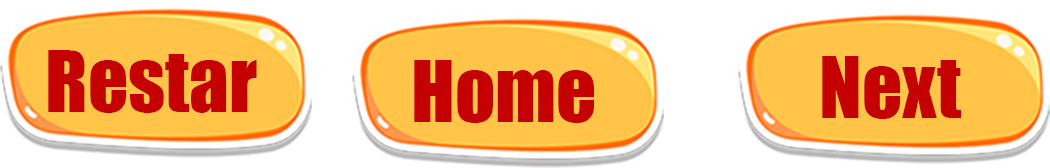
<style>
.page{position:relative;width:1050px;height:168px;background:#ffffff}
.page>*{position:absolute;margin:0}
.t1{font:79.2px "Impact";color:#c50000}
</style>
<div class="page">
<p class="t1" style="left:48px;top:50px;width:209px;height:63px">Restart</p>
<p class="t1" style="left:414px;top:60px;width:181px;height:63px">Home</p>
<p class="t1" style="left:822px;top:56px;width:140px;height:63px">Next</p>
</div>
